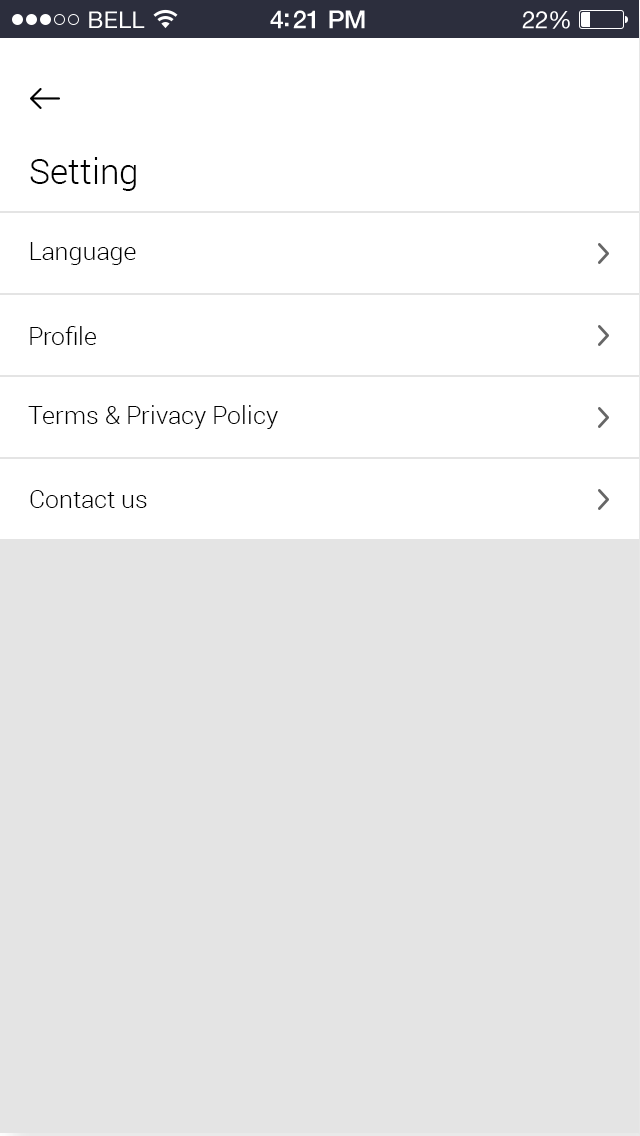
<style>
.page{position:relative;width:640px;height:1136px;background:#e4e4e4}
.page>*{position:absolute;margin:0}
.t1{font:35px "Roboto-Light";color:#000000}
.t2{font:25px "Roboto-Light";color:#000000}
</style>
<div class="page">
<p class="t1" style="left:30px;top:157px;width:106px;height:34px">Setting</p>
<p class="t2" style="left:30px;top:242px;width:106px;height:23px">Language</p>
<p class="t2" style="left:30px;top:326px;width:66px;height:19px">Profile</p>
<p class="t2" style="left:28px;top:405px;width:250px;height:24px">Terms &amp; Privacy Policy</p>
<p class="t2" style="left:30px;top:490px;width:117px;height:18px">Contact us</p>
</div>
